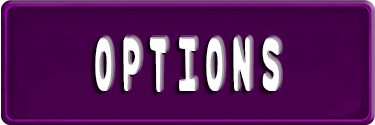
<style>
.page{position:relative;width:375px;height:125px}
.page>*{position:absolute;margin:0}
.t1{font:109px "HilariousComicslight";letter-spacing:0.24em;color:#ffffff;font-variant:small-caps;font-weight:bold;scale:0.45 1}
</style>
<div class="page">
<p class="t1" style="left:95px;top:36px;width:186px;height:56px">options</p>
</div>
